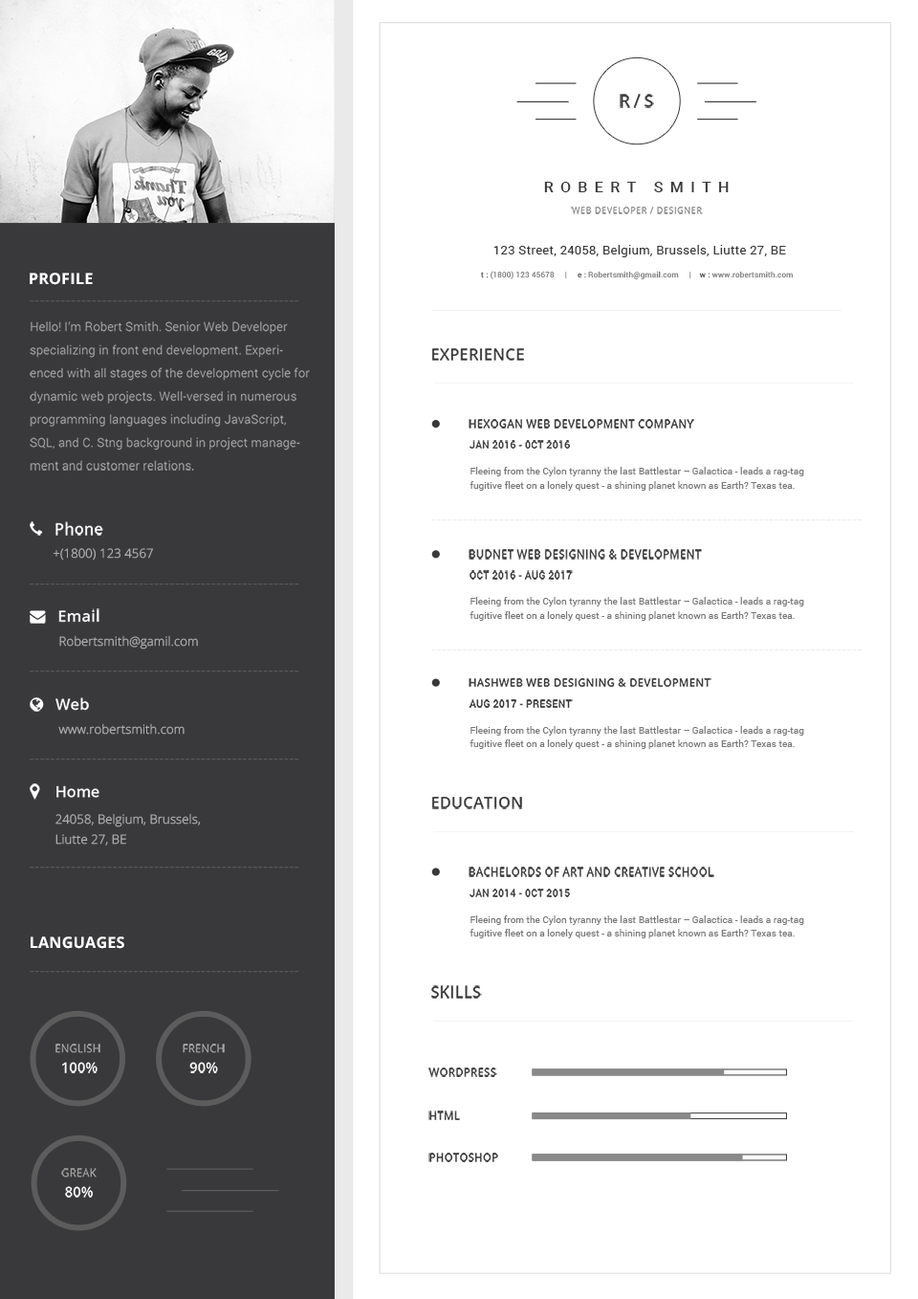
<style>
.page{position:relative;width:918px;height:1299px;background:#ffffff}
.page>*{position:absolute;margin:0}
.t1{font:17px "OpenSans-Semibold";letter-spacing:-0.025em;color:#39383a;text-transform:uppercase}
.t2{font:15.4px "Roboto-Medium";letter-spacing:0.45em;color:#39383a;text-transform:uppercase}
.t3{font:8.5px "OpenSans";letter-spacing:0.075em;color:#808080;text-transform:uppercase}
.t4{font:12.3px "Roboto-Regular";letter-spacing:0.025em;color:#39383a}
.t5{font:15.4px "OpenSans-Bold";letter-spacing:0.015em;color:#ffffff;text-transform:uppercase}
.t6{font:7.7px "Roboto-Regular";letter-spacing:0.025em;color:#777777}
.t7{font:7.7px "Roboto-Regular";letter-spacing:0.025em;color:#39383a}
.t8{font:15.4px "OpenSans-Light";letter-spacing:0.015em;color:#5a5a5a;text-transform:uppercase}
.t9{font:12.3px/23.1px "Roboto-Light";letter-spacing:0.015em;color:#ababab}
.t10{font:15.4px "OpenSans-Semibold";letter-spacing:0.025em;color:#39383a;text-transform:uppercase}
.t11{font:10.8px "OpenSans-Semibold";letter-spacing:0.025em;color:#39383a;text-transform:uppercase}
.t12{font:10px "Roboto-Medium";letter-spacing:0.025em;color:#39383a;text-transform:uppercase}
.t13{font:9.3px/13.9px "Roboto-Regular";letter-spacing:0.015em;color:#777777}
.t14{font:15.4px "OpenSans-Light";letter-spacing:0.015em;color:#ececec;text-transform:uppercase}
.t15{font:12.3px "OpenSans-Light";letter-spacing:0.015em;color:#ababab;text-transform:uppercase}
.t16{font:12.3px "OpenSans-Light";letter-spacing:0.015em;color:#ababab}
.t17{font:12.3px/20.1px "OpenSans-Light";letter-spacing:0.015em;color:#ababab}
.t18{font:10.8px/20.1px "OpenSans";letter-spacing:0.015em;color:#ababab;text-transform:uppercase}
.t19{font:13.9px/20.1px "OpenSans-Semibold";letter-spacing:0.015em;color:#ffffff;text-transform:uppercase}
</style>
<div class="page">
<p class="t1" style="left:620px;top:94px;width:34px;height:14px">R / s</p>
<p class="t2" style="left:544px;top:182px;width:185px;height:10px">Robert Smith</p>
<p class="t3" style="left:571px;top:207px;width:132px;height:7px">Web Developer / Designer</p>
<p class="t4" style="left:494px;top:245px;width:292px;height:12px">123 Street, 24058, Belgium, Brussels, Liutte 27, BE</p>
<p class="t5" style="left:30px;top:273px;width:63px;height:12px">Profile</p>
<p class="t6" style="left:481px;top:271px;width:312px;height:8px"><span class="t7">t : </span>(1800) 123 45678     |<span class="t7">     e : </span>Robertsmith@gmail.com     |   <span class="t7"> w : </span>www.robertsmith.com</p>
<p class="t8" style="left:30px;top:300px;width:269px;height:2px">----------------------------------------------------</p>
<p class="t9" style="left:30px;top:321px;width:280px;height:150px">Hello! I’m Robert Smith. Senior Web Developer specializing in front end development. Experienced with all stages of the development cycle for dynamic web projects. Well-versed in numerous programming languages including JavaScript, SQL, and C. Stng background in project management and customer relations.</p>
<p class="t10" style="left:432px;top:348px;width:92px;height:13px">Experience</p>
<p class="t11" style="left:469px;top:419px;width:225px;height:9px">Hexogan Web Development Company</p>
<p class="t12" style="left:470px;top:440px;width:100px;height:9px">Jan 2016 - 0ct 2016</p>
<p class="t13" style="left:470px;top:467px;width:334px;height:24px">Fleeing from the Cylon tyranny the last Battlestar – Galactica - leads a rag-tag fugitive fleet on a lonely quest - a shining planet known as Earth? Texas tea.</p>
<p class="t14" style="left:431px;top:519px;width:431px;height:2px">-----------------------------------------------------------------------------------</p>
<p class="t15" style="left:53px;top:548px;width:100px;height:12px">+(1800) 123 4567</p>
<p class="t11" style="left:469px;top:549px;width:233px;height:10px">Budnet Web Designing &amp; Development</p>
<p class="t12" style="left:470px;top:570px;width:103px;height:10px">Oct 2016 - Aug 2017</p>
<p class="t8" style="left:30px;top:583px;width:269px;height:2px">----------------------------------------------------</p>
<p class="t13" style="left:470px;top:597px;width:334px;height:24px">Fleeing from the Cylon tyranny the last Battlestar – Galactica - leads a rag-tag fugitive fleet on a lonely quest - a shining planet known as Earth? Texas tea.</p>
<p class="t16" style="left:59px;top:635px;width:139px;height:14px">Robertsmith@gamil.com</p>
<p class="t14" style="left:431px;top:649px;width:431px;height:2px">-----------------------------------------------------------------------------------</p>
<p class="t8" style="left:30px;top:670px;width:269px;height:2px">----------------------------------------------------</p>
<p class="t11" style="left:469px;top:678px;width:243px;height:9px">HashWeb Web Designing &amp; Development</p>
<p class="t12" style="left:469px;top:699px;width:104px;height:9px">Aug 2017 - Present</p>
<p class="t16" style="left:58px;top:723px;width:127px;height:12px">www.robertsmith.com</p>
<p class="t13" style="left:470px;top:726px;width:334px;height:23px">Fleeing from the Cylon tyranny the last Battlestar – Galactica - leads a rag-tag fugitive fleet on a lonely quest - a shining planet known as Earth? Texas tea.</p>
<p class="t8" style="left:30px;top:758px;width:269px;height:2px">----------------------------------------------------</p>
<p class="t10" style="left:432px;top:797px;width:90px;height:12px">Education</p>
<p class="t17" style="left:55px;top:813px;width:146px;height:32px">24058, Belgium, Brussels, <br>Liutte 27, BE</p>
<p class="t8" style="left:30px;top:866px;width:269px;height:2px">----------------------------------------------------</p>
<p class="t11" style="left:469px;top:866px;width:245px;height:11px">Bachelords of Art and Creative School</p>
<p class="t12" style="left:470px;top:888px;width:100px;height:9px">Jan 2014 - 0ct 2015</p>
<p class="t13" style="left:470px;top:915px;width:334px;height:23px">Fleeing from the Cylon tyranny the last Battlestar – Galactica - leads a rag-tag fugitive fleet on a lonely quest - a shining planet known as Earth? Texas tea.</p>
<p class="t5" style="left:31px;top:936px;width:93px;height:13px">Languages</p>
<p class="t8" style="left:30px;top:971px;width:269px;height:2px">----------------------------------------------------</p>
<p class="t10" style="left:431px;top:985px;width:51px;height:13px">Skills</p>
<p class="t18" style="left:55px;top:1043px;width:45px;height:30px;text-align:center">English <br><span class="t19">100%</span></p>
<p class="t18" style="left:183px;top:1043px;width:42px;height:30px;text-align:center">French<br><span class="t19">90%</span></p>
<p class="t11" style="left:428px;top:1067px;width:69px;height:10px">Wordpress</p>
<p class="t11" style="left:428px;top:1110px;width:32px;height:10px">Html</p>
<p class="t11" style="left:428px;top:1152px;width:70px;height:10px">PhotoShop</p>
<p class="t18" style="left:61px;top:1168px;width:36px;height:29px;text-align:center">Greak<br><span class="t19">80%</span></p>
</div>
